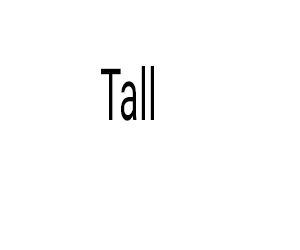
<style>
.page{position:relative;width:300px;height:250px;background:#ffffff}
.page>*{position:absolute;margin:0}
.t1{font:72px "Roboto-Regular";color:#000000;scale:0.5 1}
</style>
<div class="page">
<p class="t1" style="left:101px;top:66px;width:53px;height:55px">Tall</p>
</div>
